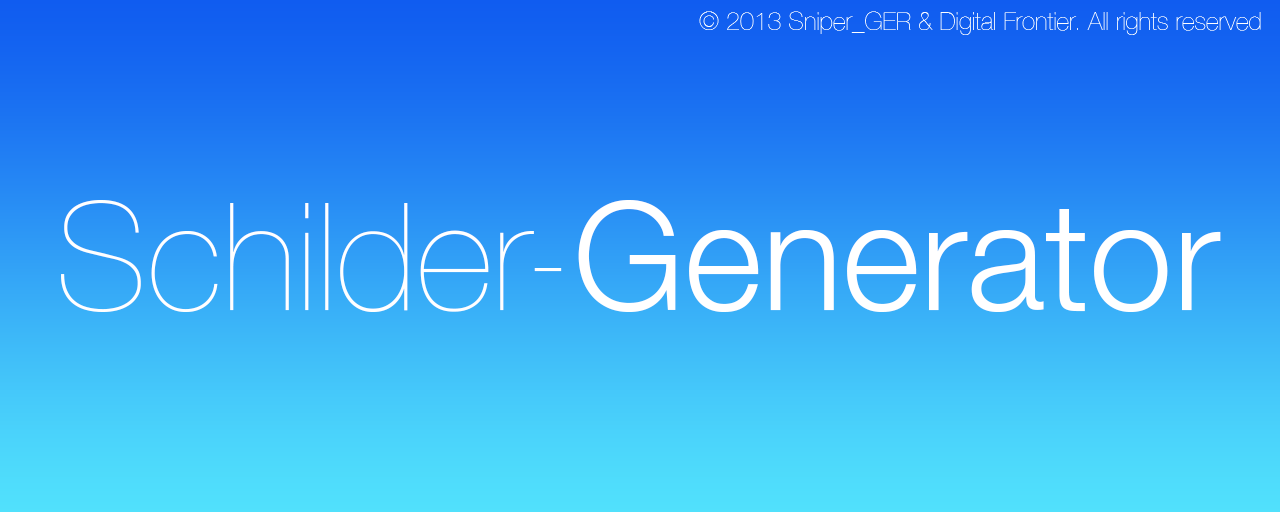
<style>
.page{position:relative;width:1280px;height:512px}
.page>*{position:absolute;margin:0}
.t1{font:150px "HelveticaNeue-UltraLight";color:#ffffff}
.t2{font:150px "HelveticaNeue-Light";color:#ffffff}
</style>
<div class="page">
<p class="t1" style="left:61px;top:200px;width:1160px;height:112px">Schilder-<span class="t2">Generator</span></p>
</div>
